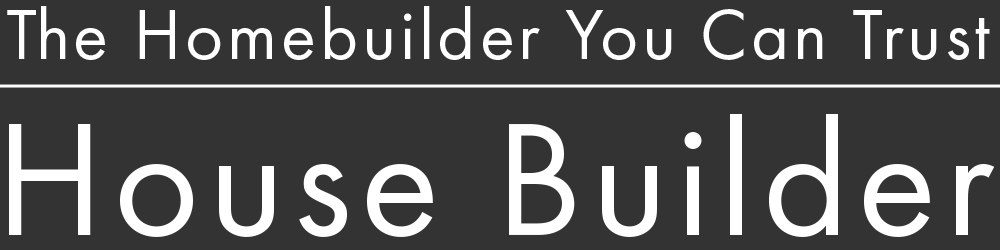
<style>
.page{position:relative;width:1000px;height:250px;background:#333333}
.page>*{position:absolute;margin:0}
.t1{font:73.2px "FuturaPT-Book";letter-spacing:0.05em;color:#ffffff}
.t2{font:165.7px "FuturaPT-Book";letter-spacing:0.05em;color:#ffffff}
</style>
<div class="page">
<p class="t1" style="left:7px;top:6px;width:983px;height:54px">The Homebuilder You Can Trust</p>
<p class="t2" style="left:9px;top:114px;width:986px;height:123px">House Builder</p>
</div>
